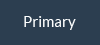
<style>
.page{position:relative;width:100px;height:45px;background:#2c3e50}
.page>*{position:absolute;margin:0}
.t1{font:15px "Lato-Regular";color:#feffff}
</style>
<div class="page">
<p class="t1" style="left:24px;top:16px;width:52px;height:14px">Primary</p>
</div>
